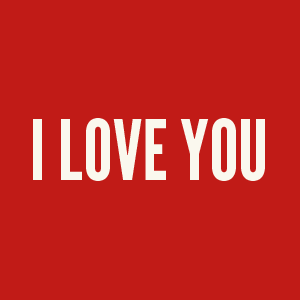
<style>
.page{position:relative;width:300px;height:300px;background:#c11b17}
.page>*{position:absolute;margin:0}
.t1{font:83.3px "LeagueGothic";color:#faf8ee}
</style>
<div class="page">
<p class="t1" style="left:33px;top:118px;width:232px;height:63px">I LOVE YOU</p>
</div>
